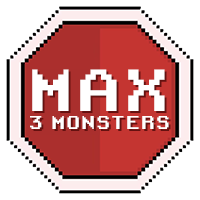
<style>
.page{position:relative;width:200px;height:200px;background:#ffffff}
.page>*{position:absolute;margin:0}
.t1{font:57.2px "RetroGaming";letter-spacing:0.06em;color:#ffffff}
.t2{font:18px "RetroGaming";letter-spacing:0.06em;color:#ffffff}
.t3{font:18px "RetroGaming";letter-spacing:0.06em}
</style>
<div class="page">
<p class="t1" style="left:32px;top:69px;width:133px;height:42px">MAX</p>
<p class="t1" style="left:34px;top:71px;width:133px;height:42px">MAX</p>
<p class="t2" style="left:30px;top:116px;width:139px;height:13px">3 MONSTERS</p>
<p class="t3" style="left:32px;top:118px;width:139px;height:13px">3 MONSTERS</p>
</div>
